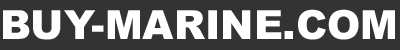
<style>
.page{position:relative;width:400px;height:50px;background:#333333}
.page>*{position:absolute;margin:0}
.t1{font:40px "Arial-Black";color:#ffffff}
</style>
<div class="page">
<p class="t1" style="left:3px;top:9px;width:392px;height:31px">BUY-MARINE.COM</p>
</div>
